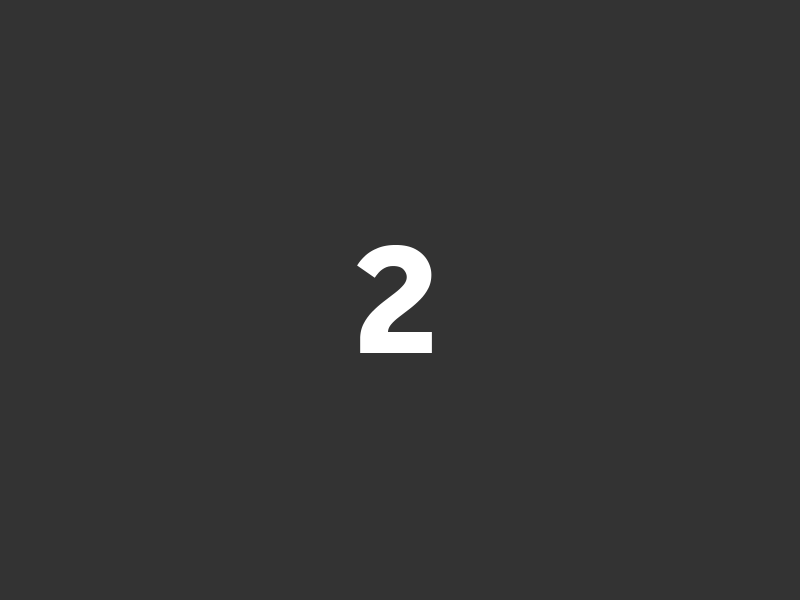
<style>
.page{position:relative;width:800px;height:600px;background:#333333}
.page>*{position:absolute;margin:0}
.t1{font:166.7px "Effra-Bold";color:#ffffff}
</style>
<div class="page">
<p class="t1" style="left:357px;top:245px;width:75px;height:108px">2</p>
</div>
